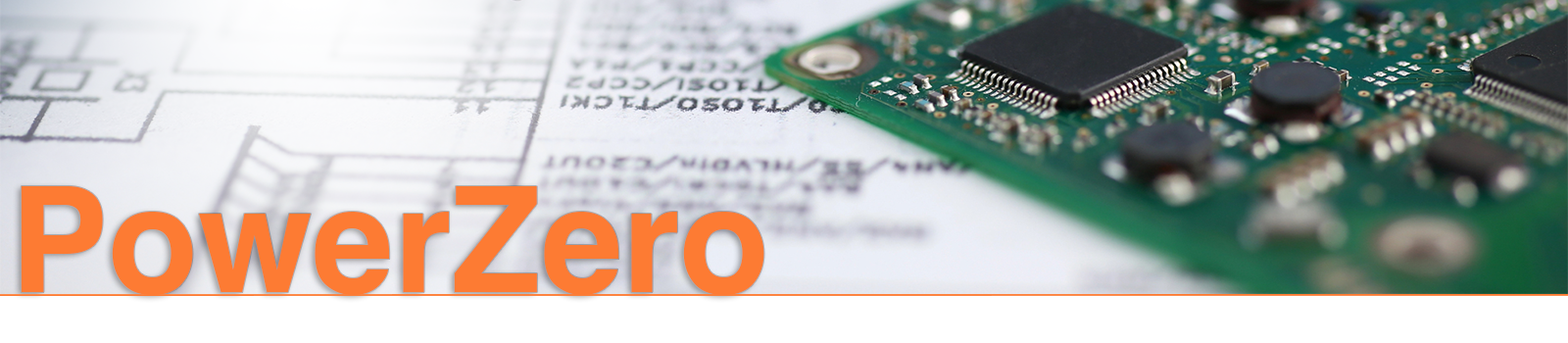
<style>
.page{position:relative;width:1568px;height:343px}
.page>*{position:absolute;margin:0}
.t1{font:147px "Helvetica-Bold";color:#fd7b33}
</style>
<div class="page">
<p class="t1" style="left:21px;top:186px;width:743px;height:109px">PowerZero</p>
</div>
